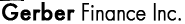
<style>
.page{position:relative;width:185px;height:24px;background:#ffffff}
.page>*{position:absolute;margin:0}
.t1{font:22px "Futura-Light";color:#000000;font-weight:bold;scale:0.87 1}
.t2{font:22px "Futura-Medium";color:#000000;font-weight:bold;scale:0.97 1}
</style>
<div class="page">
<p class="t1" style="left:2px;top:2px;width:179px;height:19px"><span class="t2">Gerber </span>Finance Inc.</p>
</div>
